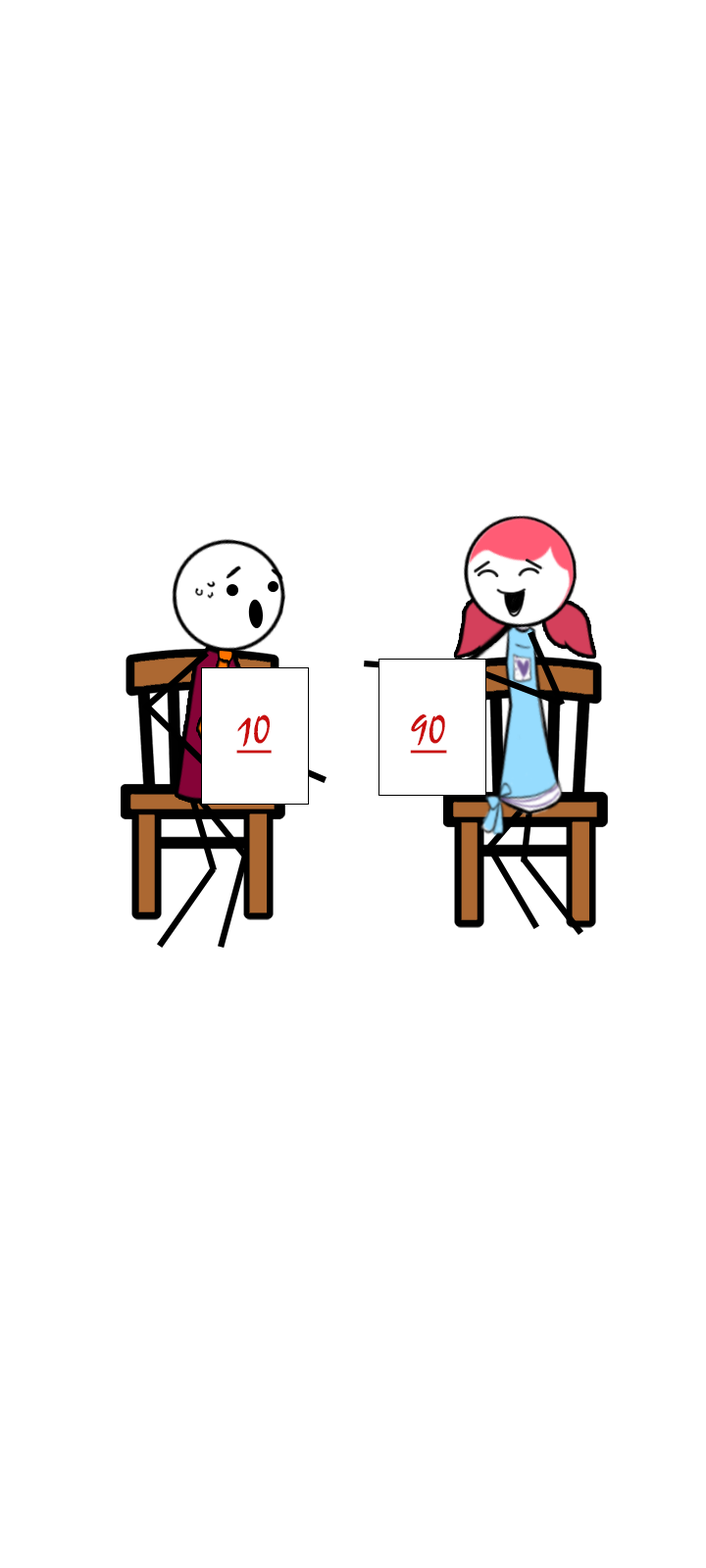
<style>
.page{position:relative;width:706px;height:1568px;background:#ffffff}
.page>*{position:absolute;margin:0}
.t1{font:40.8px "Mistral";color:#c90f0f;text-decoration:underline}
</style>
<div class="page">
<p class="t1" style="left:410px;top:713px;width:37px;height:41px">90</p>
<p class="t1" style="left:236px;top:714px;width:35px;height:40px">10</p>
</div>
